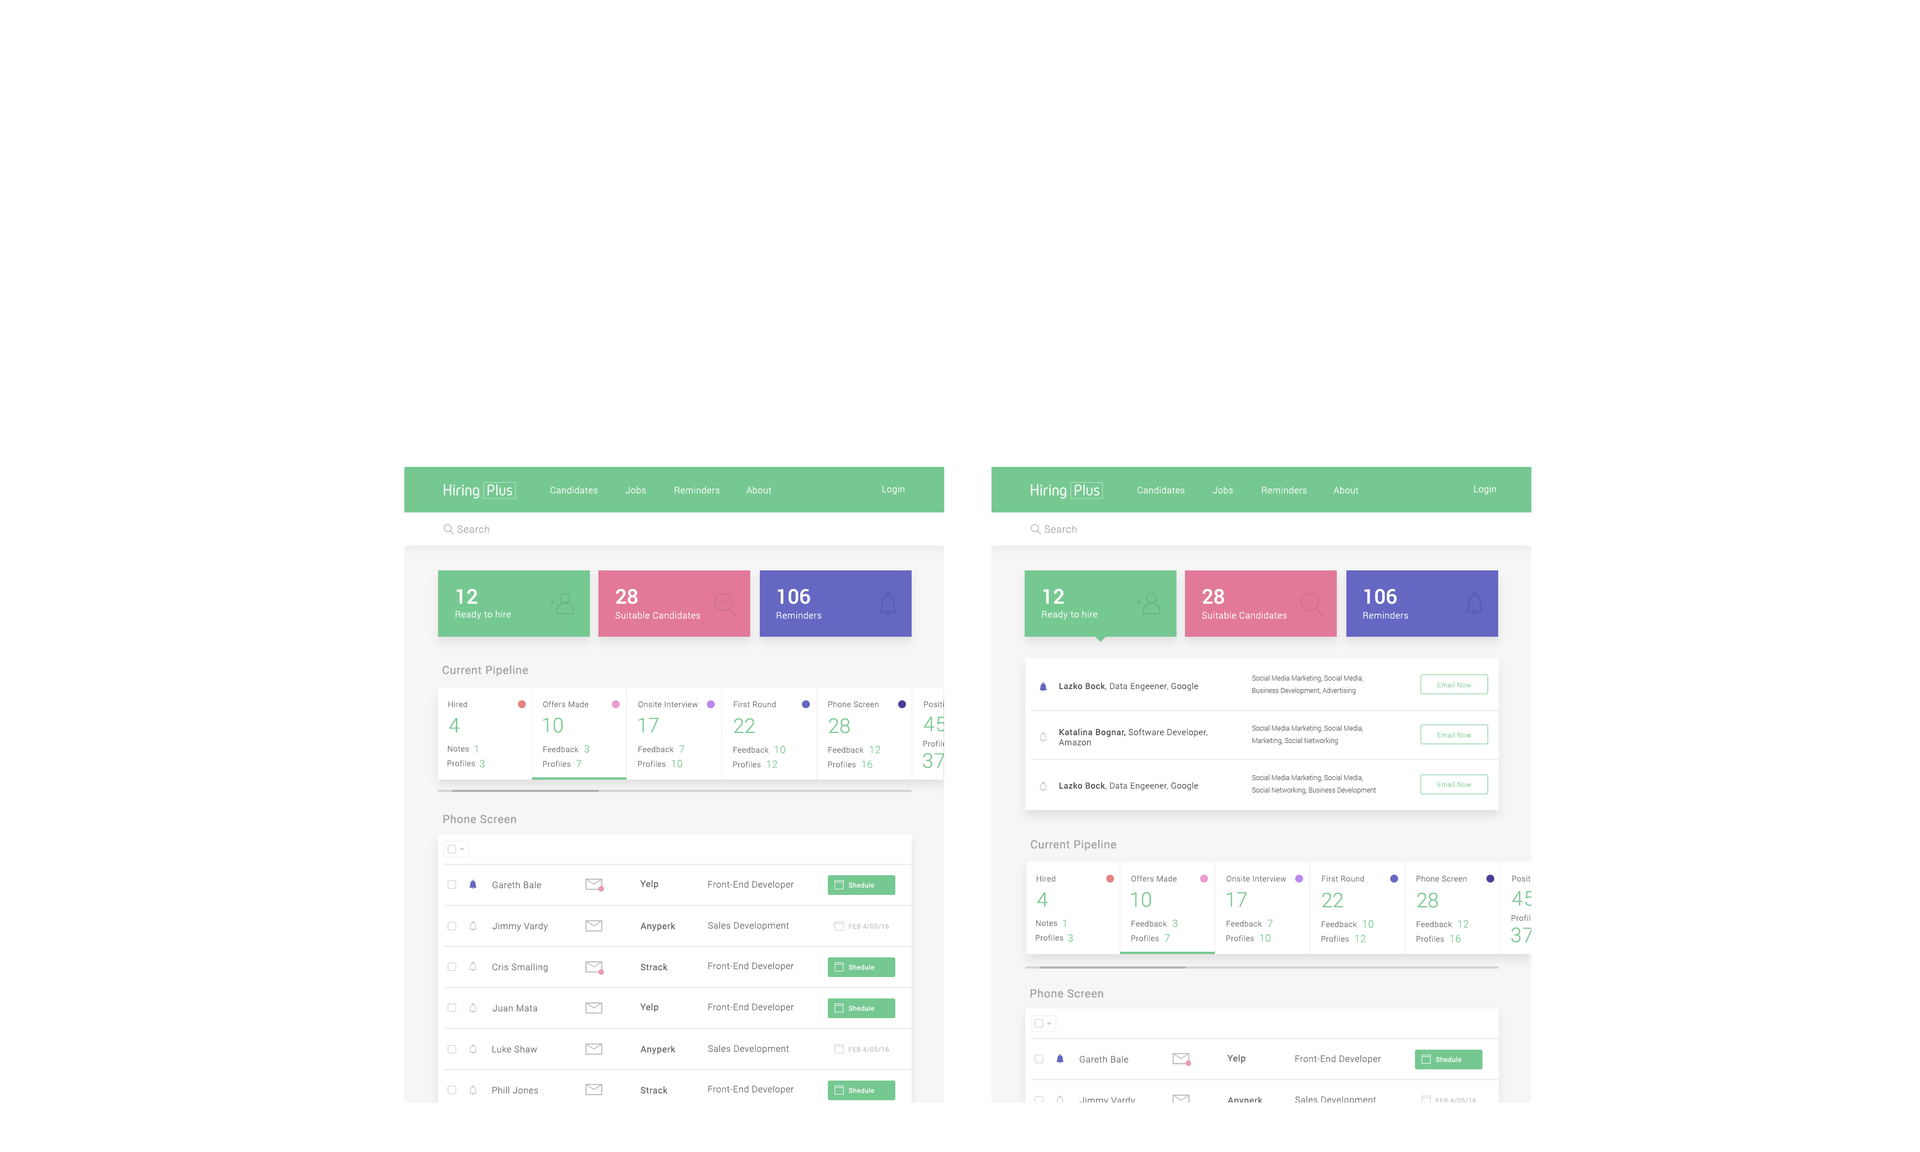
<style>
.page{position:relative;width:1920px;height:1152px;background:#ffffff}
.page>*{position:absolute;margin:0}
.t1{font:9px "Roboto-Light";letter-spacing:0.04em;color:#ffffff}
.t2{font:10.1px "Roboto-Light";letter-spacing:0.04em;color:#a3a3a3}
.t3{font:20.2px "Roboto-Medium";color:#ffffff}
.t4{font:11.2px "Roboto-Regular";letter-spacing:0.04em;color:#9f9f9f}
.t5{font:6.8px/12.4px "Roboto-Light";color:#5b5b5c}
.t6{font:8.3px "Roboto-Light";letter-spacing:0.04em;color:#3d3d3d}
.t7{font:8.3px "Roboto-Regular";letter-spacing:0.04em;color:#3d3d3d}
.t8{font:6.8px "Roboto-Light";letter-spacing:0.04em;color:#76c891}
.t9{font:7.9px "Roboto-Light";letter-spacing:0.04em;color:#626262}
.t10{font:7.9px "Roboto-Light";letter-spacing:0.04em}
.t11{font:20.2px "Roboto-Light";letter-spacing:0.04em;color:#76c891}
.t12{font:20.2px "Roboto-Light";color:#76c891}
.t13{font:8.4px/10.1px "Roboto-Light";letter-spacing:0.04em;color:#3d3d3d}
.t14{font:8.4px/10.1px "Roboto-Regular";letter-spacing:0.04em;color:#3d3d3d}
.t15{font:10.1px "Roboto-Light";letter-spacing:0.04em;color:#76c891}
.t16{font:9px "Roboto-Light";letter-spacing:0.04em;color:#626262}
.t17{font:9px "Roboto-Regular";letter-spacing:0.04em;color:#626262}
.t18{font:6.8px "Roboto-Regular";letter-spacing:0.04em;color:#ffffff}
.t19{font:6.8px "Roboto-Regular";letter-spacing:0.04em;color:#c1c1c1}
</style>
<div class="page">
<p class="t1" style="left:675px;top:486px;width:45px;height:8px">Reminders</p>
<p class="t1" style="left:883px;top:485px;width:21px;height:9px">Login</p>
<p class="t1" style="left:1262px;top:486px;width:45px;height:8px">Reminders</p>
<p class="t1" style="left:1474px;top:485px;width:22px;height:9px">Login</p>
<p class="t1" style="left:551px;top:487px;width:47px;height:7px">Candidates</p>
<p class="t1" style="left:626px;top:487px;width:20px;height:7px">Jobs</p>
<p class="t1" style="left:746px;top:487px;width:26px;height:7px">About</p>
<p class="t1" style="left:1138px;top:487px;width:47px;height:7px">Candidates</p>
<p class="t1" style="left:1213px;top:487px;width:20px;height:7px">Jobs</p>
<p class="t1" style="left:1334px;top:487px;width:25px;height:7px">About</p>
<p class="t2" style="left:457px;top:525px;width:32px;height:8px">Search</p>
<p class="t2" style="left:1045px;top:525px;width:32px;height:8px">Search</p>
<p class="t3" style="left:457px;top:589px;width:21px;height:15px">12</p>
<p class="t3" style="left:616px;top:589px;width:22px;height:15px">28</p>
<p class="t3" style="left:778px;top:589px;width:33px;height:15px">106</p>
<p class="t3" style="left:1043px;top:589px;width:21px;height:15px">12</p>
<p class="t3" style="left:1203px;top:589px;width:22px;height:15px">28</p>
<p class="t3" style="left:1365px;top:589px;width:32px;height:15px">106</p>
<p class="t1" style="left:456px;top:610px;width:55px;height:10px">Ready to hire</p>
<p class="t1" style="left:615px;top:611px;width:85px;height:8px">Suitable Candidates</p>
<p class="t1" style="left:777px;top:611px;width:45px;height:8px">Reminders</p>
<p class="t1" style="left:1042px;top:610px;width:55px;height:10px">Ready to hire</p>
<p class="t1" style="left:1202px;top:611px;width:85px;height:8px">Suitable Candidates</p>
<p class="t1" style="left:1364px;top:611px;width:44px;height:8px">Reminders</p>
<p class="t4" style="left:443px;top:665px;width:85px;height:12px">Current Pipeline</p>
<p class="t5" style="left:1252px;top:675px;width:112px;height:20px">Social Media Marketing, Social Media, <br>Business Development, Advertising</p>
<p class="t6" style="left:1060px;top:682px;width:139px;height:9px"><span class="t7">Lazko Bock</span>, Data Engeener, Google</p>
<p class="t8" style="left:1438px;top:682px;width:34px;height:5px">Email Now</p>
<p class="t9" style="left:448px;top:701px;width:19px;height:7px">Hired</p>
<p class="t9" style="left:543px;top:701px;width:45px;height:7px">Offers Made</p>
<p class="t9" style="left:638px;top:701px;width:60px;height:7px">Onsite Interview</p>
<p class="t9" style="left:734px;top:701px;width:42px;height:7px">First Round</p>
<p class="t9" style="left:829px;top:701px;width:50px;height:7px">Phone Screen</p>
<p class="t10" style="left:924px;top:701px;width:34px;height:7px">Positions</p>
<p class="t11" style="left:449px;top:718px;width:11px;height:14px">4</p>
<p class="t12" style="left:543px;top:717px;width:20px;height:16px">10</p>
<p class="t12" style="left:638px;top:718px;width:21px;height:14px">17</p>
<p class="t12" style="left:734px;top:718px;width:21px;height:15px">22</p>
<p class="t12" style="left:829px;top:718px;width:21px;height:16px">28</p>
<p class="t11" style="left:924px;top:717px;width:22px;height:15px">45</p>
<p class="t5" style="left:1252px;top:725px;width:112px;height:20px">Social Media Marketing, Social Media, <br>Marketing, Social Networking</p>
<p class="t13" style="left:1059px;top:728px;width:149px;height:18px"><span class="t14">Katalina Bognar,</span> Software Developer,<br>Amazon</p>
<p class="t8" style="left:1438px;top:732px;width:34px;height:5px">Email Now</p>
<p class="t9" style="left:448px;top:746px;width:21px;height:6px">Notes</p>
<p class="t15" style="left:475px;top:745px;width:3px;height:8px">1</p>
<p class="t9" style="left:543px;top:746px;width:36px;height:7px">Feedback</p>
<p class="t15" style="left:584px;top:745px;width:6px;height:8px">3</p>
<p class="t9" style="left:638px;top:746px;width:36px;height:7px">Feedback</p>
<p class="t15" style="left:680px;top:745px;width:5px;height:8px">7</p>
<p class="t9" style="left:734px;top:746px;width:35px;height:7px">Feedback</p>
<p class="t15" style="left:775px;top:745px;width:10px;height:9px">10</p>
<p class="t9" style="left:829px;top:746px;width:35px;height:7px">Feedback</p>
<p class="t15" style="left:870px;top:745px;width:11px;height:8px">12</p>
<p class="t9" style="left:924px;top:740px;width:27px;height:7px">Profiles</p>
<p class="t9" style="left:448px;top:760px;width:27px;height:7px">Profiles</p>
<p class="t15" style="left:480px;top:759px;width:5px;height:9px">3</p>
<p class="t9" style="left:543px;top:760px;width:28px;height:7px">Profiles</p>
<p class="t15" style="left:577px;top:760px;width:5px;height:7px">7</p>
<p class="t9" style="left:638px;top:760px;width:28px;height:7px">Profiles</p>
<p class="t15" style="left:672px;top:759px;width:10px;height:9px">10</p>
<p class="t9" style="left:734px;top:761px;width:27px;height:7px">Profiles</p>
<p class="t15" style="left:767px;top:760px;width:11px;height:8px">12</p>
<p class="t9" style="left:829px;top:761px;width:27px;height:7px">Profiles</p>
<p class="t15" style="left:862px;top:760px;width:10px;height:8px">16</p>
<p class="t11" style="left:923px;top:753px;width:22px;height:15px">37</p>
<p class="t6" style="left:1060px;top:782px;width:139px;height:9px"><span class="t7">Lazko Bock</span>, Data Engeener, Google</p>
<p class="t5" style="left:1252px;top:775px;width:124px;height:19px">Social Media Marketing, Social Media,<br>Social Networking, Business Development</p>
<p class="t8" style="left:1438px;top:781px;width:34px;height:6px">Email Now</p>
<p class="t4" style="left:443px;top:814px;width:73px;height:10px">Phone Screen</p>
<p class="t4" style="left:1031px;top:840px;width:86px;height:11px">Current Pipeline</p>
<p class="t16" style="left:493px;top:881px;width:48px;height:8px">Gareth Bale</p>
<p class="t17" style="left:640px;top:880px;width:19px;height:9px">Yelp</p>
<p class="t16" style="left:708px;top:880px;width:86px;height:10px">Front-End Developer</p>
<p class="t9" style="left:1037px;top:875px;width:19px;height:7px">Hired</p>
<p class="t9" style="left:1132px;top:875px;width:45px;height:7px">Offers Made</p>
<p class="t9" style="left:1227px;top:875px;width:59px;height:7px">Onsite Interview</p>
<p class="t9" style="left:1322px;top:875px;width:42px;height:7px">First Round</p>
<p class="t9" style="left:1417px;top:875px;width:50px;height:7px">Phone Screen</p>
<p class="t10" style="left:1513px;top:875px;width:33px;height:7px">Positions</p>
<p class="t18" style="left:849px;top:882px;width:26px;height:6px">Shedule</p>
<p class="t11" style="left:1037px;top:892px;width:11px;height:15px">4</p>
<p class="t12" style="left:1131px;top:892px;width:20px;height:15px">10</p>
<p class="t12" style="left:1227px;top:892px;width:20px;height:15px">17</p>
<p class="t12" style="left:1322px;top:892px;width:21px;height:15px">22</p>
<p class="t12" style="left:1418px;top:892px;width:20px;height:16px">28</p>
<p class="t11" style="left:1512px;top:891px;width:22px;height:15px">45</p>
<p class="t9" style="left:1512px;top:915px;width:28px;height:6px">Profiles</p>
<p class="t16" style="left:493px;top:922px;width:55px;height:10px">Jimmy Vardy</p>
<p class="t17" style="left:641px;top:922px;width:35px;height:10px">Anyperk</p>
<p class="t16" style="left:708px;top:921px;width:81px;height:10px">Sales Development</p>
<p class="t19" style="left:849px;top:924px;width:40px;height:5px">FEB 4/05/16</p>
<p class="t9" style="left:1036px;top:920px;width:22px;height:6px">Notes</p>
<p class="t15" style="left:1063px;top:920px;width:3px;height:7px">1</p>
<p class="t9" style="left:1132px;top:920px;width:35px;height:7px">Feedback</p>
<p class="t15" style="left:1173px;top:919px;width:5px;height:9px">3</p>
<p class="t9" style="left:1227px;top:920px;width:35px;height:7px">Feedback</p>
<p class="t15" style="left:1268px;top:920px;width:5px;height:7px">7</p>
<p class="t9" style="left:1322px;top:921px;width:35px;height:7px">Feedback</p>
<p class="t15" style="left:1363px;top:920px;width:11px;height:8px">10</p>
<p class="t9" style="left:1417px;top:921px;width:35px;height:7px">Feedback</p>
<p class="t15" style="left:1458px;top:920px;width:11px;height:8px">12</p>
<p class="t11" style="left:1511px;top:927px;width:22px;height:16px">37</p>
<p class="t9" style="left:1036px;top:934px;width:28px;height:7px">Profiles</p>
<p class="t15" style="left:1068px;top:934px;width:5px;height:8px">3</p>
<p class="t9" style="left:1132px;top:935px;width:27px;height:7px">Profiles</p>
<p class="t15" style="left:1165px;top:934px;width:5px;height:8px">7</p>
<p class="t9" style="left:1227px;top:935px;width:27px;height:7px">Profiles</p>
<p class="t15" style="left:1260px;top:934px;width:11px;height:8px">10</p>
<p class="t9" style="left:1322px;top:935px;width:27px;height:7px">Profiles</p>
<p class="t15" style="left:1355px;top:934px;width:11px;height:8px">12</p>
<p class="t9" style="left:1417px;top:935px;width:27px;height:7px">Profiles</p>
<p class="t15" style="left:1450px;top:935px;width:11px;height:8px">16</p>
<p class="t16" style="left:492px;top:963px;width:56px;height:10px">Cris Smalling</p>
<p class="t17" style="left:641px;top:963px;width:27px;height:8px">Strack</p>
<p class="t16" style="left:708px;top:962px;width:86px;height:9px">Front-End Developer</p>
<p class="t18" style="left:849px;top:964px;width:26px;height:6px">Shedule</p>
<p class="t4" style="left:1030px;top:989px;width:74px;height:9px">Phone Screen</p>
<p class="t16" style="left:493px;top:1005px;width:44px;height:7px">Juan Mata</p>
<p class="t17" style="left:640px;top:1003px;width:19px;height:9px">Yelp</p>
<p class="t16" style="left:708px;top:1003px;width:86px;height:9px">Front-End Developer</p>
<p class="t18" style="left:849px;top:1005px;width:26px;height:6px">Shedule</p>
<p class="t16" style="left:492px;top:1045px;width:45px;height:8px">Luke Shaw</p>
<p class="t17" style="left:641px;top:1045px;width:35px;height:10px">Anyperk</p>
<p class="t16" style="left:708px;top:1045px;width:81px;height:9px">Sales Development</p>
<p class="t19" style="left:849px;top:1047px;width:40px;height:5px">FEB 4/05/16</p>
<p class="t16" style="left:1080px;top:1055px;width:48px;height:8px">Gareth Bale</p>
<p class="t17" style="left:1227px;top:1054px;width:19px;height:10px">Yelp</p>
<p class="t16" style="left:1295px;top:1055px;width:87px;height:9px">Front-End Developer</p>
<p class="t18" style="left:1436px;top:1056px;width:26px;height:6px">Shedule</p>
<p class="t16" style="left:708px;top:1085px;width:86px;height:10px">Front-End Developer</p>
<p class="t16" style="left:492px;top:1086px;width:46px;height:8px">Phill Jones</p>
<p class="t17" style="left:641px;top:1086px;width:27px;height:8px">Strack</p>
<p class="t18" style="left:849px;top:1087px;width:26px;height:6px">Shedule</p>
<p class="t16" style="left:1080px;top:1096px;width:55px;height:10px">Jimmy Vardy</p>
<p class="t17" style="left:1228px;top:1096px;width:35px;height:10px">Anyperk</p>
<p class="t16" style="left:1295px;top:1096px;width:81px;height:9px">Sales Development</p>
<p class="t19" style="left:1436px;top:1098px;width:41px;height:6px">FEB 4/05/16</p>
</div>
